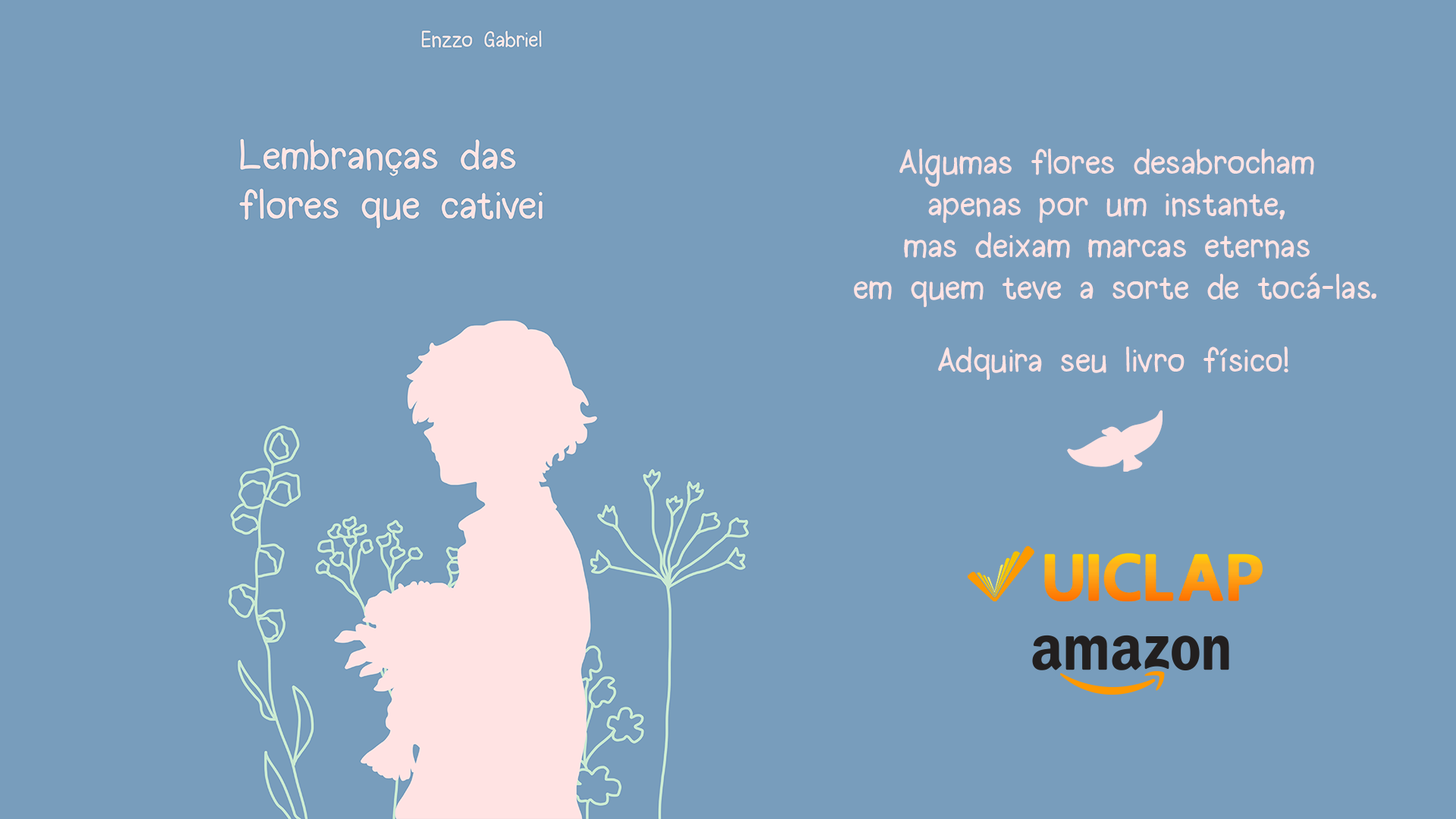
<style>
.page{position:relative;width:1456px;height:819px;background:#789dbc}
.page>*{position:absolute;margin:0}
.t1{font:34.7px "Halogen";color:#ffe3e3}
</style>
<div class="page">
<p class="t1" style="left:854px;top:149px;width:522px;height:158px;text-align:center">Algumas flores desabrocham <br>apenas por um instante, <br>mas deixam marcas eternas <br>em quem teve a sorte de tocá-las.</p>
<p class="t1" style="left:938px;top:347px;width:350px;height:33px">Adquira seu livro físico!</p>
</div>
